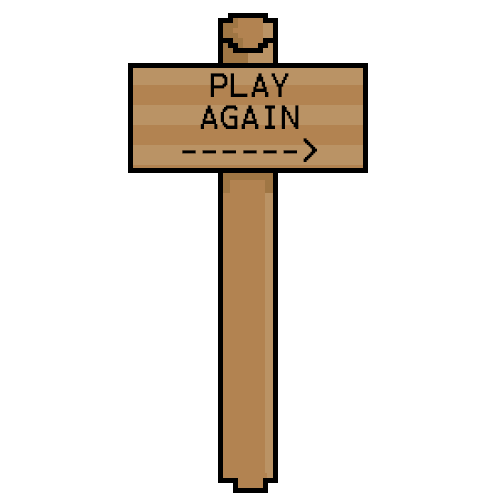
<style>
.page{position:relative;width:500px;height:500px;background:#ffffff}
.page>*{position:absolute;margin:0}
.t1{font:27px "Terminal";color:#000000}
</style>
<div class="page">
<p class="t1" style="left:182px;top:73px;width:135px;height:89px;text-align:center">PLAY <br>AGAIN<br>------&gt;</p>
</div>
